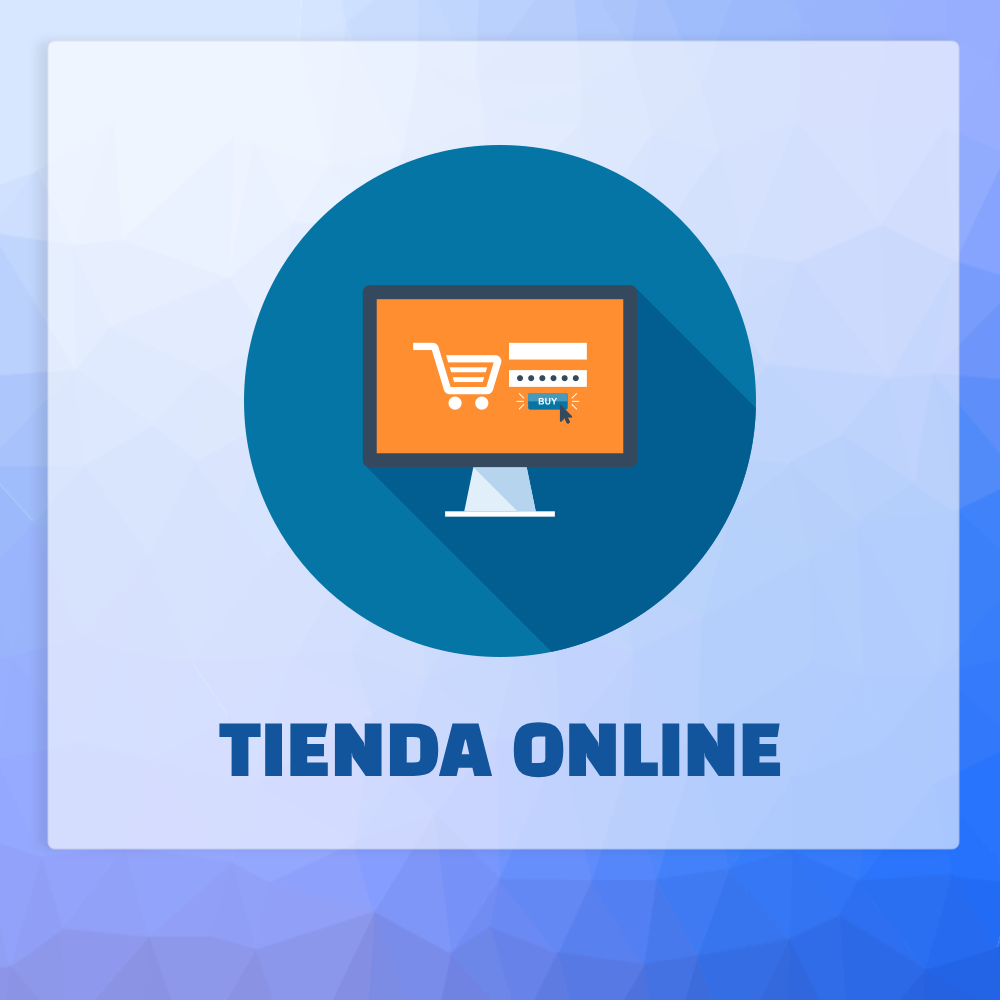
<style>
.page{position:relative;width:1000px;height:1000px}
.page>*{position:absolute;margin:0}
.t1{font:70px "BlackHanSans-Regular";color:#13559c}
</style>
<div class="page">
<p class="t1" style="left:219px;top:722px;width:562px;height:56px">TIENDA ONLINE</p>
</div>
